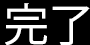
<style>
.page{position:relative;width:90px;height:45px;background:#000000}
.page>*{position:absolute;margin:0}
.t1{font:45px "SimSun";color:#ffffff}
</style>
<div class="page">
<p class="t1" style="left:5px;top:3px;width:85px;height:43px">完了</p>
</div>
